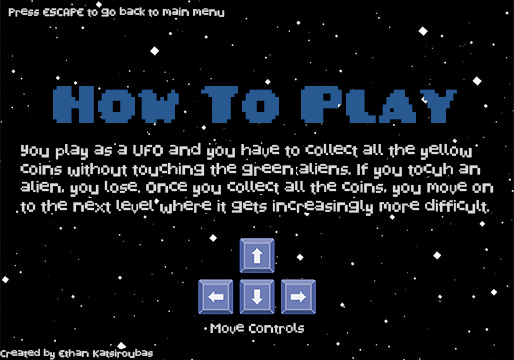
<style>
.page{position:relative;width:514px;height:360px;background:#000000}
.page>*{position:absolute;margin:0}
.t1{font:10.8px "PixelatedDisplayRegular";color:#dcdcdc}
.t2{font:59.3px "PixelatedPusab";color:#285991}
.t3{font:15.6px "PixelatedDisplayRegular";color:#dcdcdc}
.t4{font:12.9px "PixelatedDisplayRegular";color:#dcdcdc}
.t5{font:9.8px "PixelatedDisplayRegular";color:#dcdcdc}
</style>
<div class="page">
<p class="t1" style="left:8px;top:7px;width:217px;height:10px">Press ESCAPE to go back to main menu</p>
<p class="t2" style="left:53px;top:86px;width:404px;height:37px">How To Play</p>
<p class="t3" style="left:20px;top:142px;width:474px;height:74px">You play as a UFO and you have to collect all the yellow<br>coins without touching the green aliens. If you tocuh an<br>alien, you lose. Once you collect all the coins, you move on<br>to the next level where it gets increasingly more difficult.</p>
<p class="t4" style="left:210px;top:322px;width:94px;height:13px">Move Controls</p>
<p class="t5" style="left:0px;top:348px;width:153px;height:12px">Created by Ethan Katsiroubas</p>
</div>
